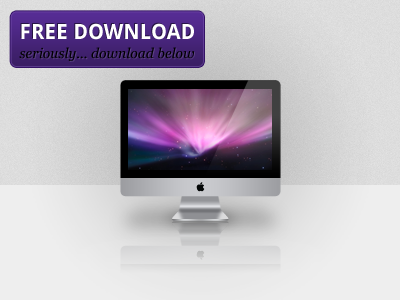
<style>
.page{position:relative;width:400px;height:300px}
.page>*{position:absolute;margin:0}
.t1{font:21px "DroidSans-Bold";color:#ffffff;text-transform:uppercase}
.t2{font:14px "Georgia-Italic";color:#000000}
</style>
<div class="page">
<p class="t1" style="left:21px;top:23px;width:173px;height:17px">FREE DOWNLOAD</p>
<p class="t2" style="left:19px;top:47px;width:175px;height:14px">seriously... download below</p>
</div>
